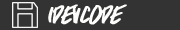
<style>
.page{position:relative;width:180px;height:30px;background:#333333}
.page>*{position:absolute;margin:0}
.t1{font:40px "Flashlight-Regular";color:#fdfdfb;font-weight:bold}
</style>
<div class="page">
<p class="t1" style="left:48px;top:4px;width:79px;height:21px">iDevCode</p>
</div>
